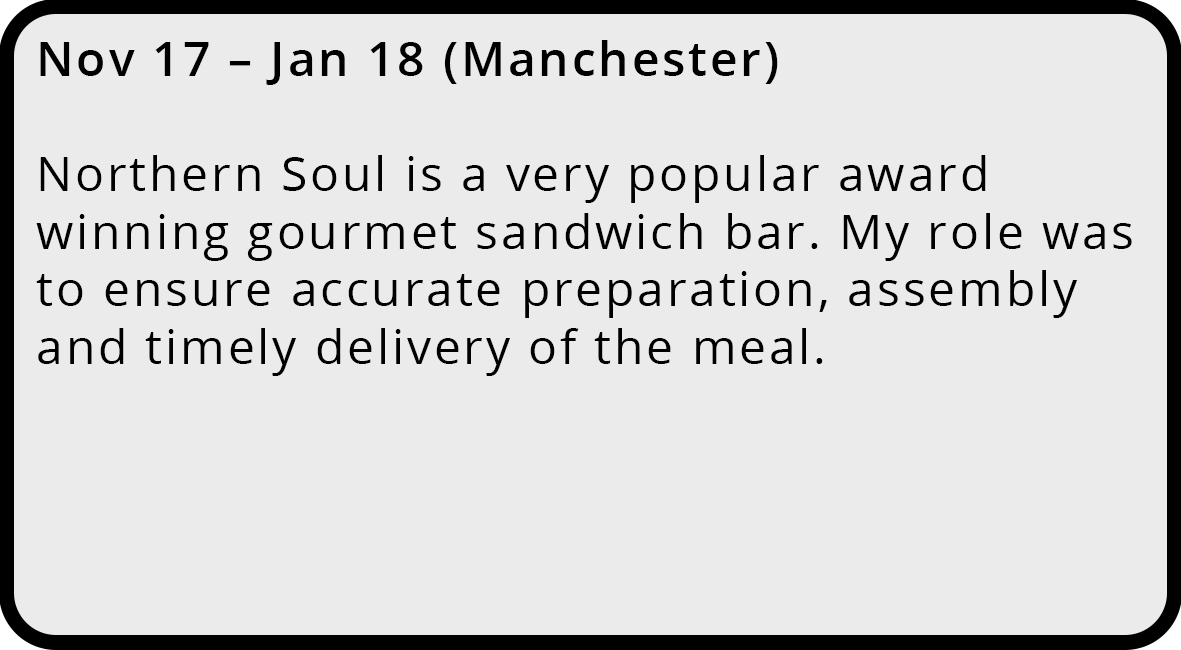
<style>
.page{position:relative;width:1181px;height:650px;background:#ebebeb}
.page>*{position:absolute;margin:0}
.t1{font:47.9px "OpenSans-Regular";letter-spacing:0.06em;color:#000000}
.t2{font:47.9px "OpenSans-SemiBold";letter-spacing:0.06em;color:#000000}
</style>
<div class="page">
<p class="t1" style="left:36px;top:40px;width:1096px;height:336px"><span class="t2">Nov 17 – Jan 18 (Manchester)<br><br></span>Northern Soul is a very popular award winning gourmet sandwich bar. My role was to ensure accurate preparation, assembly and timely delivery of the meal.</p>
</div>
